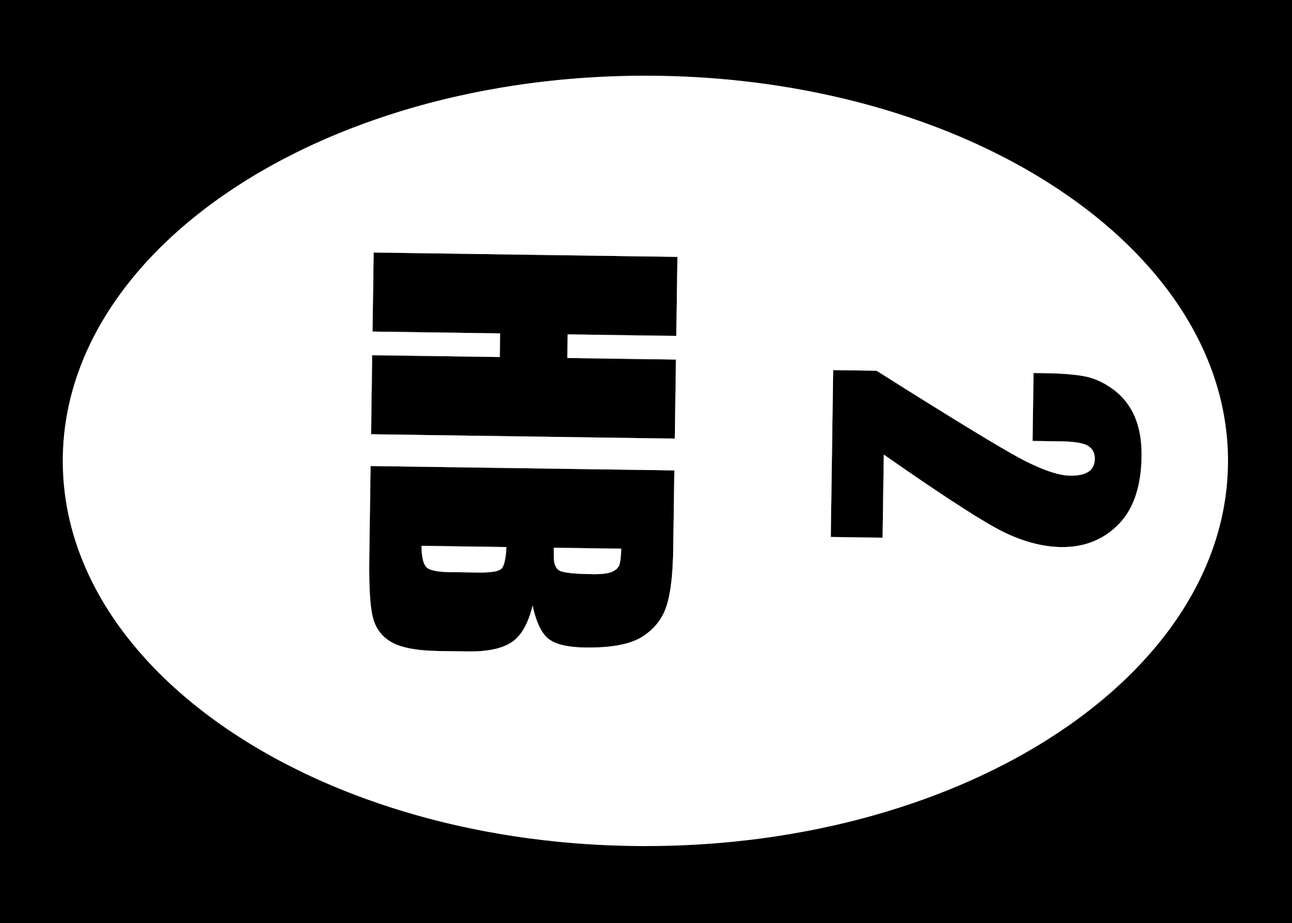
<style>
.page{position:relative;width:1292px;height:923px;background:#000000}
.page>*{position:absolute;margin:0}
.t1{font:384.3px "Impact";color:#000000}
</style>
<div class="page">
<p class="t1" style="left:369px;top:252px;width:773px;height:400px;text-align:center;rotate:91deg">2<br>HB</p>
</div>
